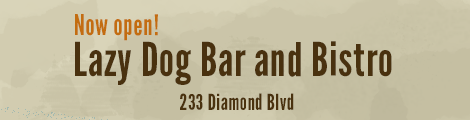
<style>
.page{position:relative;width:470px;height:120px}
.page>*{position:absolute;margin:0}
.t1{font:28.6px "LeagueGothic-Regular";letter-spacing:0.02em;color:#c36d10}
.t2{font:46.7px "LeagueGothic-Regular";letter-spacing:0.02em;color:#4a320f}
.t3{font:22.1px "LeagueGothic-Regular";letter-spacing:0.02em;color:#4a320f}
</style>
<div class="page">
<p class="t1" style="left:75px;top:14px;width:83px;height:27px">Now open!</p>
<p class="t2" style="left:75px;top:41px;width:317px;height:44px">Lazy Dog Bar and Bistro</p>
<p class="t3" style="left:180px;top:93px;width:114px;height:17px">233 Diamond Blvd</p>
</div>
